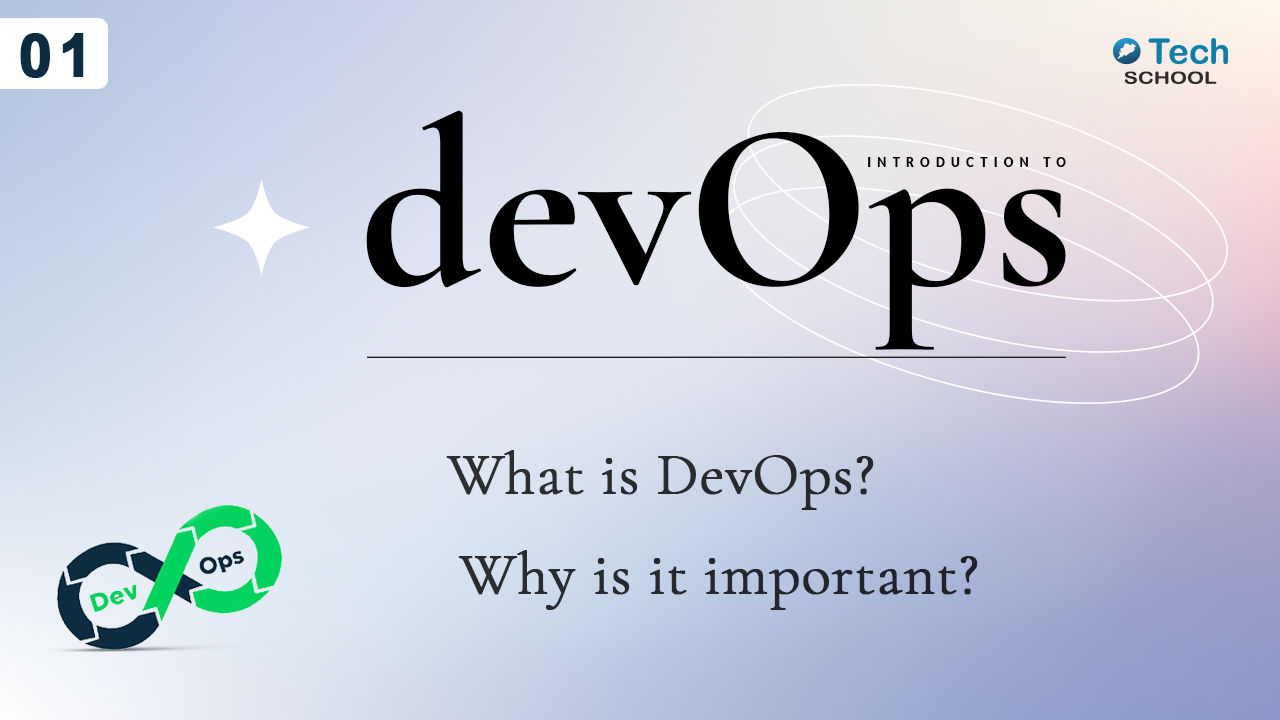
<style>
.page{position:relative;width:1280px;height:720px}
.page>*{position:absolute;margin:0}
.t1{font:60.3px "Arial-BoldMT";letter-spacing:0.08em;color:#0d2c40;font-weight:bold}
.t2{font:239.1px "CormorantGaramond-Bold";color:#000000}
.t3{font:15.2px "Lato-Black";letter-spacing:0.48em;color:#000000;text-transform:uppercase;scale:0.82 1}
.t4{font:60px "CormorantGaramond-Light";color:#292b2f;font-weight:bold}
.t5{font:60px "CormorantGaramond-Light";color:#24272d;font-weight:bold}
</style>
<div class="page">
<p class="t1" style="left:20px;top:33px;width:64px;height:45px">01</p>
<p class="t2" style="left:366px;top:110px;width:700px;height:240px">devOps</p>
<p class="t3" style="left:868px;top:157px;width:198px;height:10px">Introduction to</p>
<p class="t4" style="left:446px;top:450px;width:428px;height:60px">What is DevOps?</p>
<p class="t5" style="left:458px;top:550px;width:520px;height:60px">Why is it important?</p>
</div>
